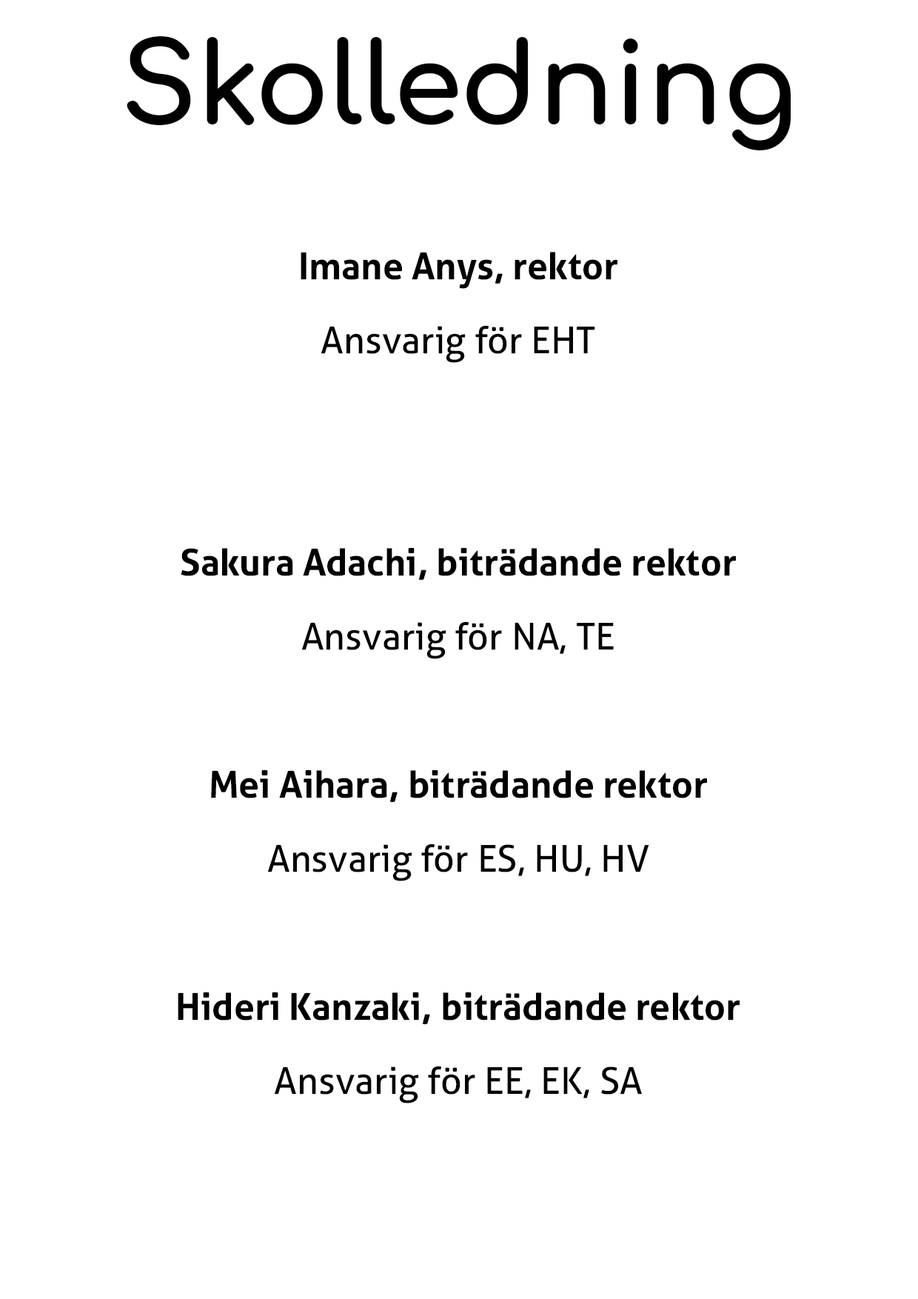
<style>
.page{position:relative;width:918px;height:1299px;background:#ffffff}
.page>*{position:absolute;margin:0}
.t1{font:111.1px "Comfortaa-Bold";color:#000000}
.t2{font:37px/74px "Aller-Bold";color:#000000}
.t3{font:37px/74px "Aller";color:#000000}
</style>
<div class="page">
<p class="t1" style="left:127px;top:36px;width:664px;height:114px">Skolledning</p>
<p class="t2" style="left:178px;top:252px;width:562px;height:851px;text-align:center">Imane Anys, rektor<br><span class="t3">Ansvarig för EHT<br></span><br><br>Sakura Adachi, biträdande rektor<br><span class="t3">Ansvarig för NA, TE<br></span><br>Mei Aihara, biträdande rektor<br><span class="t3">Ansvarig för ES, HU, HV<br></span><br>Hideri Kanzaki, biträdande rektor<br><span class="t3">Ansvarig för EE, EK, SA</span></p>
</div>
